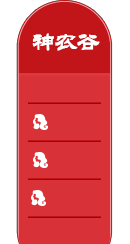
<style>
.page{position:relative;width:130px;height:244px;background:#d83138}
.page>*{position:absolute;margin:0}
.t1{font:24px "STLiti";letter-spacing:-0.08em;color:#ffffff;font-weight:bold}
</style>
<div class="page">
<p class="t1" style="left:32px;top:33px;width:68px;height:18px">神农谷</p>
</div>
